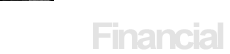
<style>
.page{position:relative;width:230px;height:54px;background:#ffffff}
.page>*{position:absolute;margin:0}
.t1{font:37px "Arial-BoldMT";letter-spacing:-0.12em;color:#e3e3e3;scale:1.07 1}
</style>
<div class="page">
<p class="t1" style="left:93px;top:22px;width:131px;height:28px">Financial</p>
</div>
